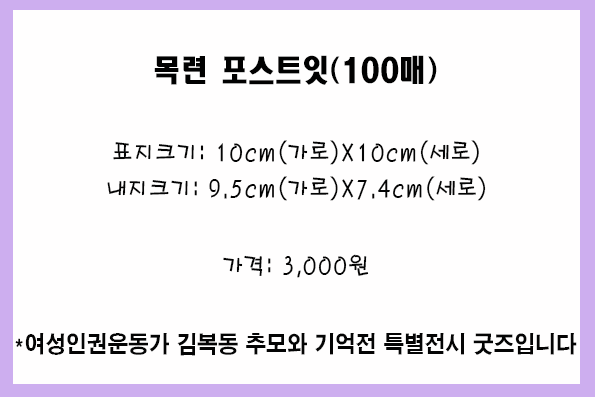
<style>
.page{position:relative;width:595px;height:397px;background:#fffefe}
.page>*{position:absolute;margin:0}
.t1{font:30px "HeadlineR-HM";color:#010101;scale:0.9 1}
.t2{font:24px/36px "H2porM";color:#040404;scale:0.9 1}
.t3{font:24px "H2porM";color:#040404;scale:0.9 1}
.t4{font:23px "H2gtrE";color:#040404;scale:0.9 1}
</style>
<div class="page">
<p class="t1" style="left:154px;top:55px;width:283px;height:30px">목련 포스트잇(100매)</p>
<p class="t2" style="left:107px;top:140px;width:379px;height:61px;text-align:center">표지크기: 10cm(가로)X10cm(세로)<br>내지크기: 9.5cm(가로)X7.4cm(세로)</p>
<p class="t3" style="left:223px;top:254px;width:146px;height:24px">가격: 3,000원</p>
<p class="t4" style="left:15px;top:333px;width:562px;height:23px">*여성인권운동가 김복동 추모와 기억전 특별전시 굿즈입니다</p>
</div>
